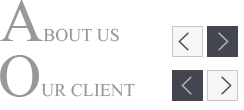
<style>
.page{position:relative;width:244px;height:110px;background:#ffffff}
.page>*{position:absolute;margin:0}
.t1{font:18px "MongolianBaiti";color:#989799}
.t2{font:60px "MongolianBaiti";color:#989799}
.t3{font:18px "MongolianBaiti";color:#999899}
.t4{font:60px "MongolianBaiti";color:#999899}
</style>
<div class="page">
<p class="t1" style="left:0px;top:0px;width:119px;height:42px"><span class="t2">A</span>BOUT US</p>
<p class="t3" style="left:0px;top:55px;width:135px;height:42px"><span class="t4">O</span>UR CLIENT</p>
</div>
